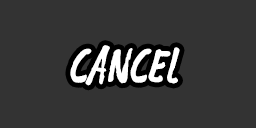
<style>
.page{position:relative;width:256px;height:128px;background:#333333}
.page>*{position:absolute;margin:0}
.t1{font:50px "Odachi";color:#ffffff;font-weight:bold}
</style>
<div class="page">
<p class="t1" style="left:70px;top:45px;width:110px;height:41px">CANCEL</p>
</div>
